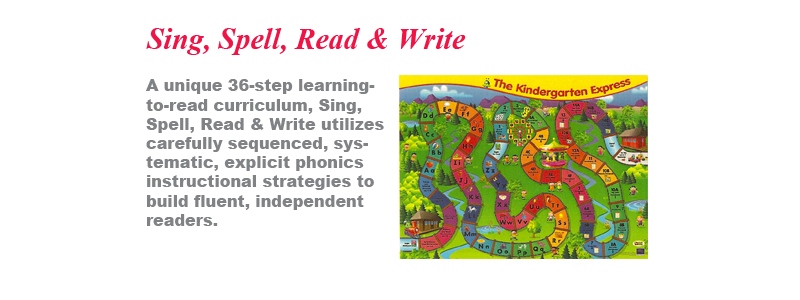
<style>
.page{position:relative;width:800px;height:300px;background:#ffffff}
.page>*{position:absolute;margin:0}
.t1{font:30px "TimesNewRomanPS-BoldItalicMT";color:#f01446}
.t2{font:16px "Arial-Black";color:#808285}
</style>
<div class="page">
<p class="t1" style="left:146px;top:28px;width:320px;height:27px">Sing, Spell, Read &amp; Write</p>
<p class="t2" style="left:146px;top:79px;width:238px;height:147px">A unique 36-step learning-to-read curriculum, Sing, Spell, Read &amp; Write utilizes carefully sequenced, systematic, explicit phonics instructional strategies to build fluent, independent readers.</p>
</div>
